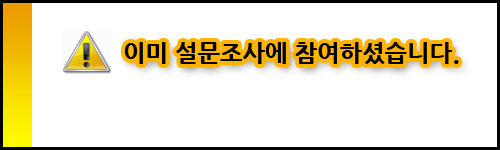
<style>
.page{position:relative;width:500px;height:150px;background:#ffffff}
.page>*{position:absolute;margin:0}
.t1{font:24px "NanumGothicExtraBold";color:#000000}
</style>
<div class="page">
<p class="t1" style="left:124px;top:42px;width:335px;height:22px">이미 설문조사에 참여하셨습니다.</p>
</div>
